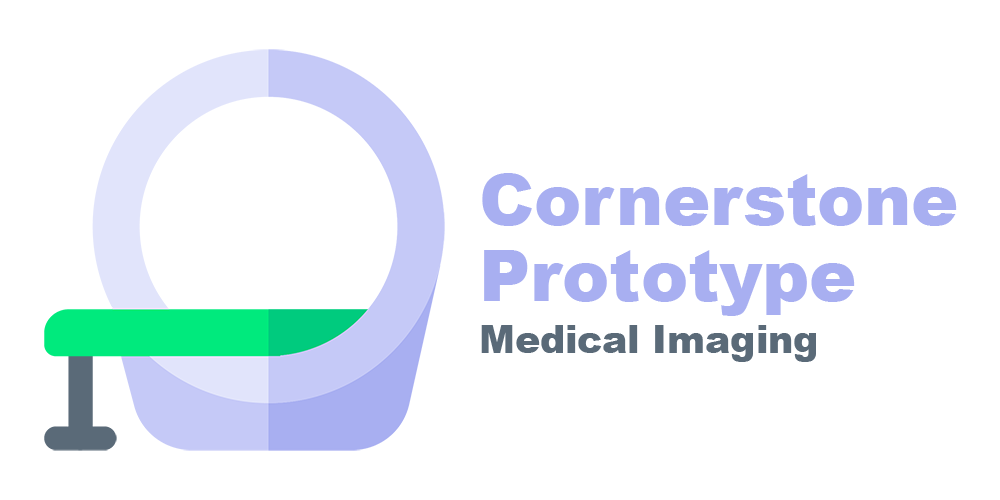
<style>
.page{position:relative;width:1000px;height:500px;background:#ffffff}
.page>*{position:absolute;margin:0}
.t1{font:70.5px "Arial-Black";color:#a8aff1}
.t2{font:37.6px "Arial-Black";color:#5a6a78}
</style>
<div class="page">
<p class="t1" style="left:482px;top:173px;width:475px;height:53px">Cornerstone</p>
<p class="t1" style="left:484px;top:250px;width:371px;height:66px">Prototype</p>
<p class="t2" style="left:481px;top:325px;width:335px;height:37px">Medical Imaging</p>
</div>
